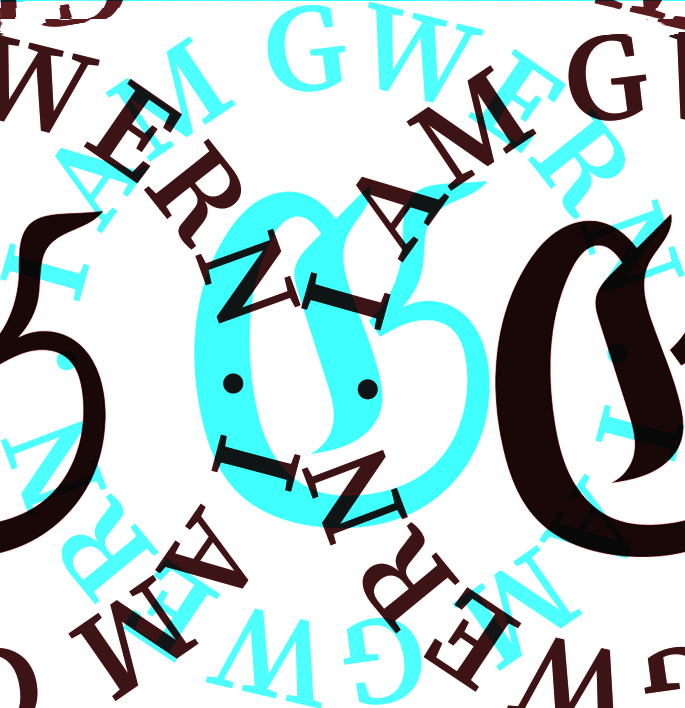
<style>
.page{position:relative;width:685px;height:708px;background:#ffffff}
.page>*{position:absolute;margin:0}
.t1{font:123.8px "SourceSerif4Roman-SemiBold";color:#4dffff;font-weight:bold}
</style>
<div class="page">
<p class="t1" style="left:0px;top:0px;width:685px;height:708px;rotate:26deg">I AM GWERN . I AM GWERN .</p>
</div>
